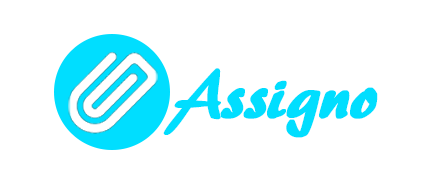
<style>
.page{position:relative;width:426px;height:183px;background:#ffffff}
.page>*{position:absolute;margin:0}
.t1{font:72px "ARBERKLEY";letter-spacing:-0.025em;color:#00deff;font-weight:bold}
</style>
<div class="page">
<p class="t1" style="left:163px;top:68px;width:215px;height:70px">Assigno</p>
</div>
